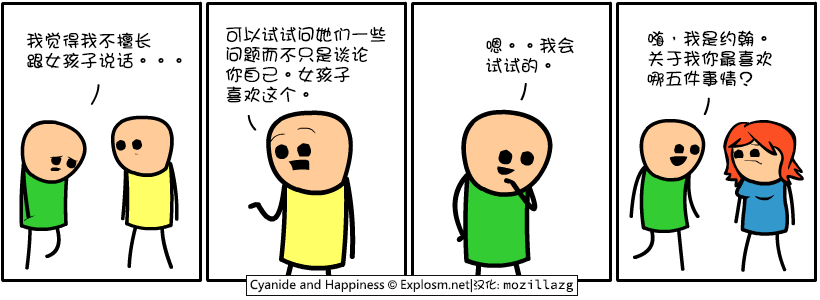
<style>
.page{position:relative;width:820px;height:300px;background:#ffffff}
.page>*{position:absolute;margin:0}
.t1{font:18px/20px "DFGirl";color:#000000}
</style>
<div class="page">
<p class="t1" style="left:225px;top:26px;width:161px;height:77px">可以试试问她们一些<br>问题而不只是谈论<br>你自己。女孩子<br>喜欢这个。</p>
<p class="t1" style="left:647px;top:30px;width:125px;height:57px">嗨，我是约翰。<br>关于我你最喜欢<br>哪五件事情？</p>
<p class="t1" style="left:26px;top:32px;width:156px;height:37px">我觉得我不擅长<br>跟女孩子说话。。。</p>
<p class="t1" style="left:486px;top:37px;width:88px;height:37px">嗯。。我会<br>试试的。</p>
</div>
